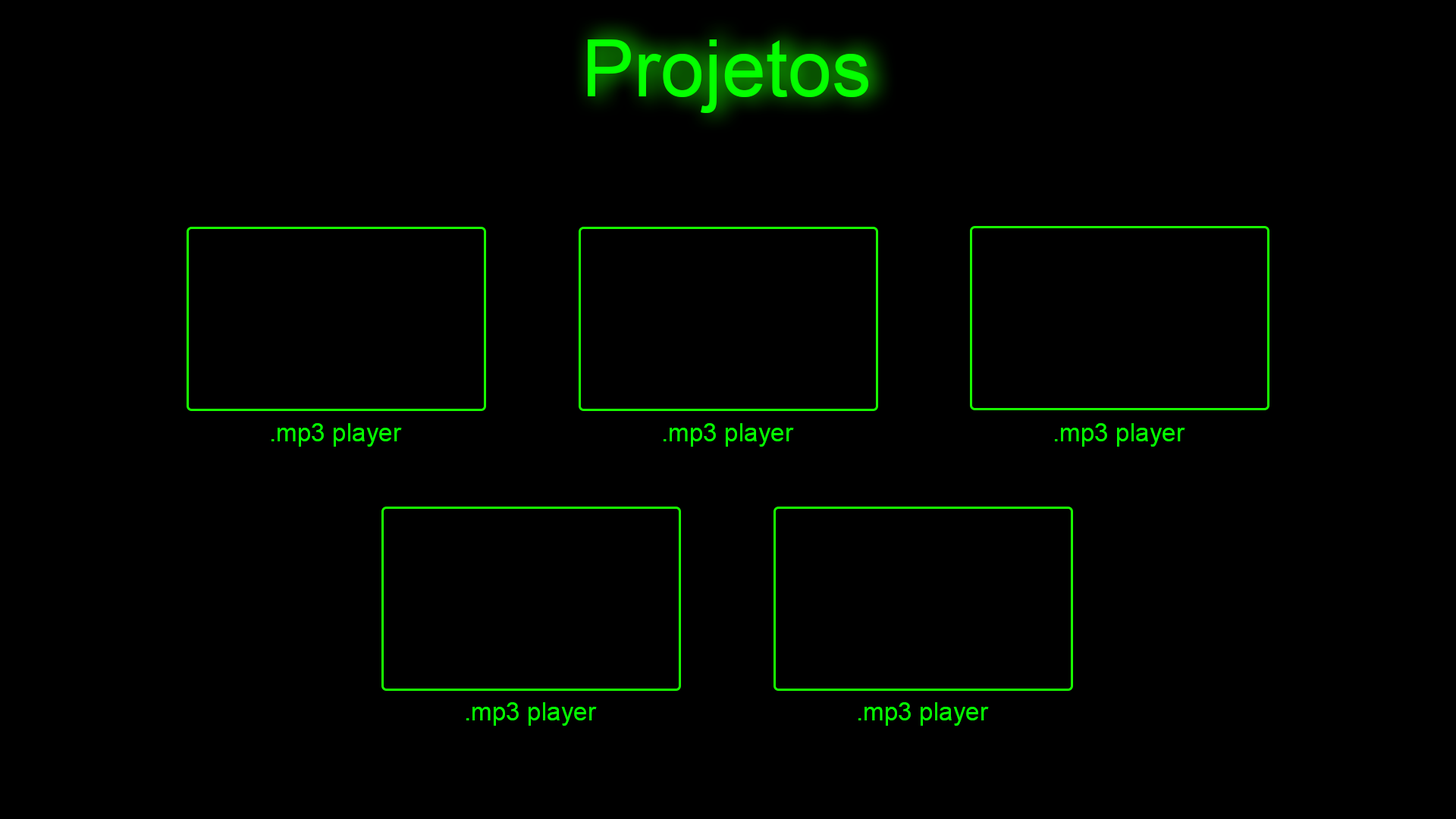
<style>
.page{position:relative;width:1456px;height:819px;background:#000000}
.page>*{position:absolute;margin:0}
.t1{font:79px "ArialMT";color:#04ff00}
.t2{font:25.3px "ArialMT";color:#04ff00}
</style>
<div class="page">
<p class="t1" style="left:588px;top:39px;width:280px;height:74px">Projetos</p>
<p class="t2" style="left:271px;top:423px;width:131px;height:24px">.mp3 player</p>
<p class="t2" style="left:664px;top:423px;width:130px;height:24px">.mp3 player</p>
<p class="t2" style="left:1055px;top:423px;width:130px;height:24px">.mp3 player</p>
<p class="t2" style="left:466px;top:702px;width:131px;height:24px">.mp3 player</p>
<p class="t2" style="left:858px;top:702px;width:131px;height:24px">.mp3 player</p>
</div>
